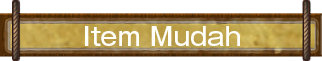
<style>
.page{position:relative;width:322px;height:61px;background:#ffffff}
.page>*{position:absolute;margin:0}
.t1{font:25px "GothicMB101Pro-Medium";color:#fffffa}
</style>
<div class="page">
<p class="t1" style="left:85px;top:26px;width:155px;height:20px">Item Mudah</p>
</div>
